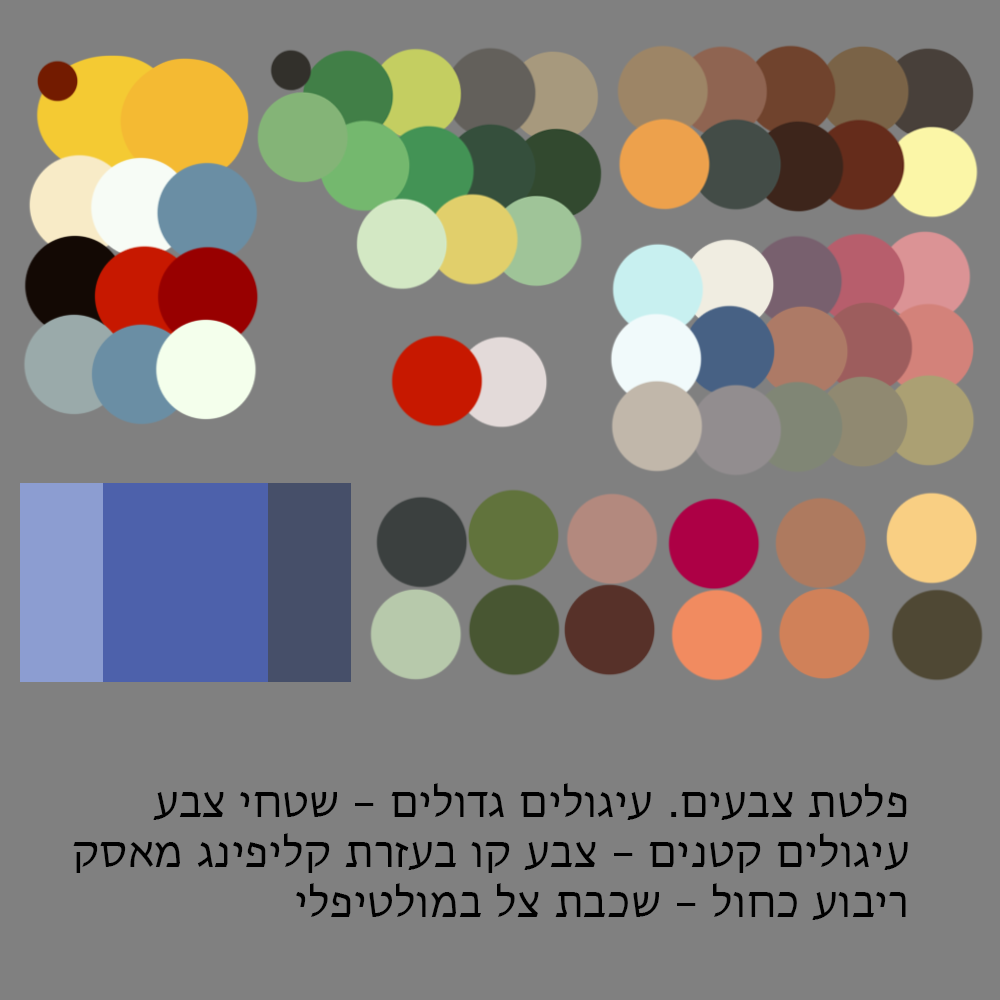
<style>
.page{position:relative;width:1000px;height:1000px;background:#808080}
.page>*{position:absolute;margin:0}
.t1{font:41.7px "LucidaGrande";color:#000000}
</style>
<div class="page">
<p class="t1" style="left:73px;top:783px;width:835px;height:137px;text-align:right">פלטת צבעים. עיגולים גדולים - שטחי צבע<br>עיגולים קטנים - צבע קו בעזרת קליפינג מאסק<br>ריבוע כחול - שכבת צל במולטיפלי</p>
</div>
